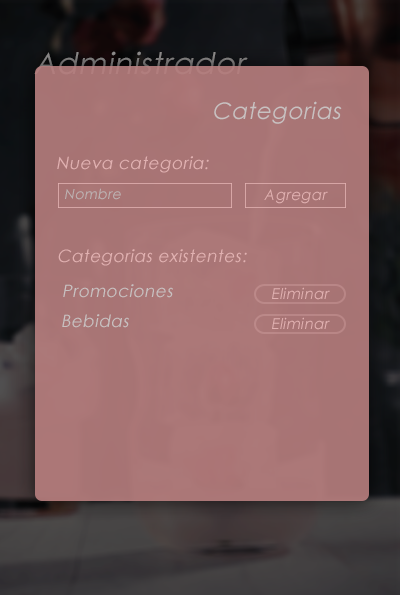
<style>
.page{position:relative;width:400px;height:595px}
.page>*{position:absolute;margin:0}
.t1{font:30px "CenturyGothic";letter-spacing:0.025em;font-style:italic}
.t2{font:23px "CenturyGothic";letter-spacing:0.025em;color:#c8c1c1;font-style:italic}
.t3{font:17px "CenturyGothic";letter-spacing:0.025em;color:#e1b1b1;font-style:italic}
.t4{font:14px "CenturyGothic";letter-spacing:0.025em;color:#bdb3b3;font-style:italic}
.t5{font:15px "CenturyGothic";letter-spacing:0.025em;color:#e1b1b1;font-style:italic}
.t6{font:17px "CenturyGothic";letter-spacing:0.025em;color:#c8c1c1;font-style:italic}
</style>
<div class="page">
<p class="t1" style="left:34px;top:51px;width:214px;height:24px">Administrador</p>
<p class="t2" style="left:214px;top:101px;width:128px;height:23px">Categorias</p>
<p class="t3" style="left:57px;top:156px;width:152px;height:17px">Nueva categoria:</p>
<p class="t4" style="left:65px;top:188px;width:56px;height:12px">Nombre</p>
<p class="t5" style="left:264px;top:189px;width:64px;height:15px">Agregar</p>
<p class="t3" style="left:58px;top:249px;width:189px;height:17px">Categorias existentes:</p>
<p class="t6" style="left:63px;top:284px;width:110px;height:14px">Promociones</p>
<p class="t5" style="left:272px;top:287px;width:58px;height:13px">Eliminar</p>
<p class="t6" style="left:62px;top:314px;width:67px;height:14px">Bebidas</p>
<p class="t5" style="left:272px;top:317px;width:58px;height:13px">Eliminar</p>
</div>
